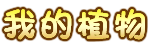
<style>
.page{position:relative;width:150px;height:47px;background:#ffffff}
.page>*{position:absolute;margin:0}
.t1{font:33px "MYoungHKS-Medium";letter-spacing:0.2em;font-weight:bold}
</style>
<div class="page">
<p class="t1" style="left:4px;top:9px;width:141px;height:31px">我的植物</p>
</div>
